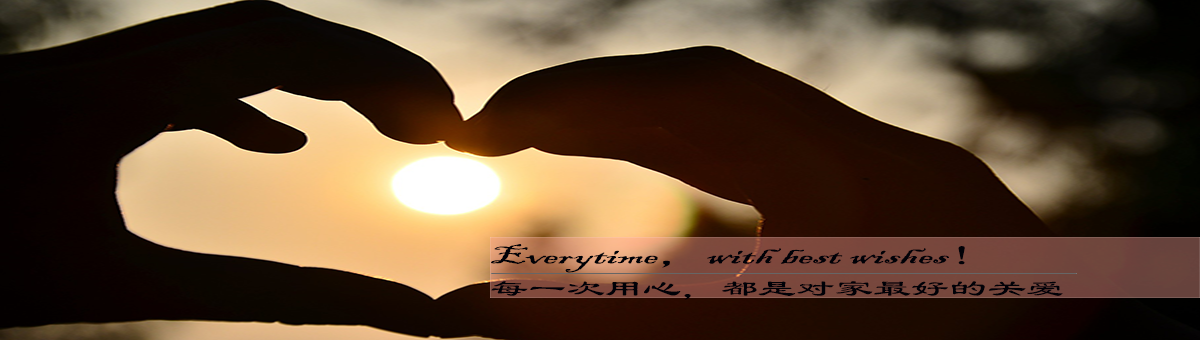
<style>
.page{position:relative;width:1200px;height:340px}
.page>*{position:absolute;margin:0}
.t1{font:25.7px "BlackadderITC-Regular";color:#000107;scale:1.86 1}
.t2{font:25.7px "LiSu";color:#000107;scale:1.86 1}
.t3{font:23.2px "LiSu";color:#000107;scale:1.65 1}
</style>
<div class="page">
<p class="t1" style="left:491px;top:244px;width:474px;height:29px">Everytime<span class="t2">，</span>with best wishes<span class="t2">！</span></p>
<p class="t3" style="left:491px;top:281px;width:572px;height:19px">每一次用心，都是对家最好的关爱</p>
</div>
